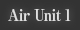
<style>
.page{position:relative;width:80px;height:30px;background:#333333}
.page>*{position:absolute;margin:0}
.t1{font:16px "RyuminPro-ExBold";letter-spacing:-0.04em;color:#dfdfdf;scale:0.9 1}
</style>
<div class="page">
<p class="t1" style="left:8px;top:9px;width:63px;height:12px">Air Unit 1</p>
</div>
